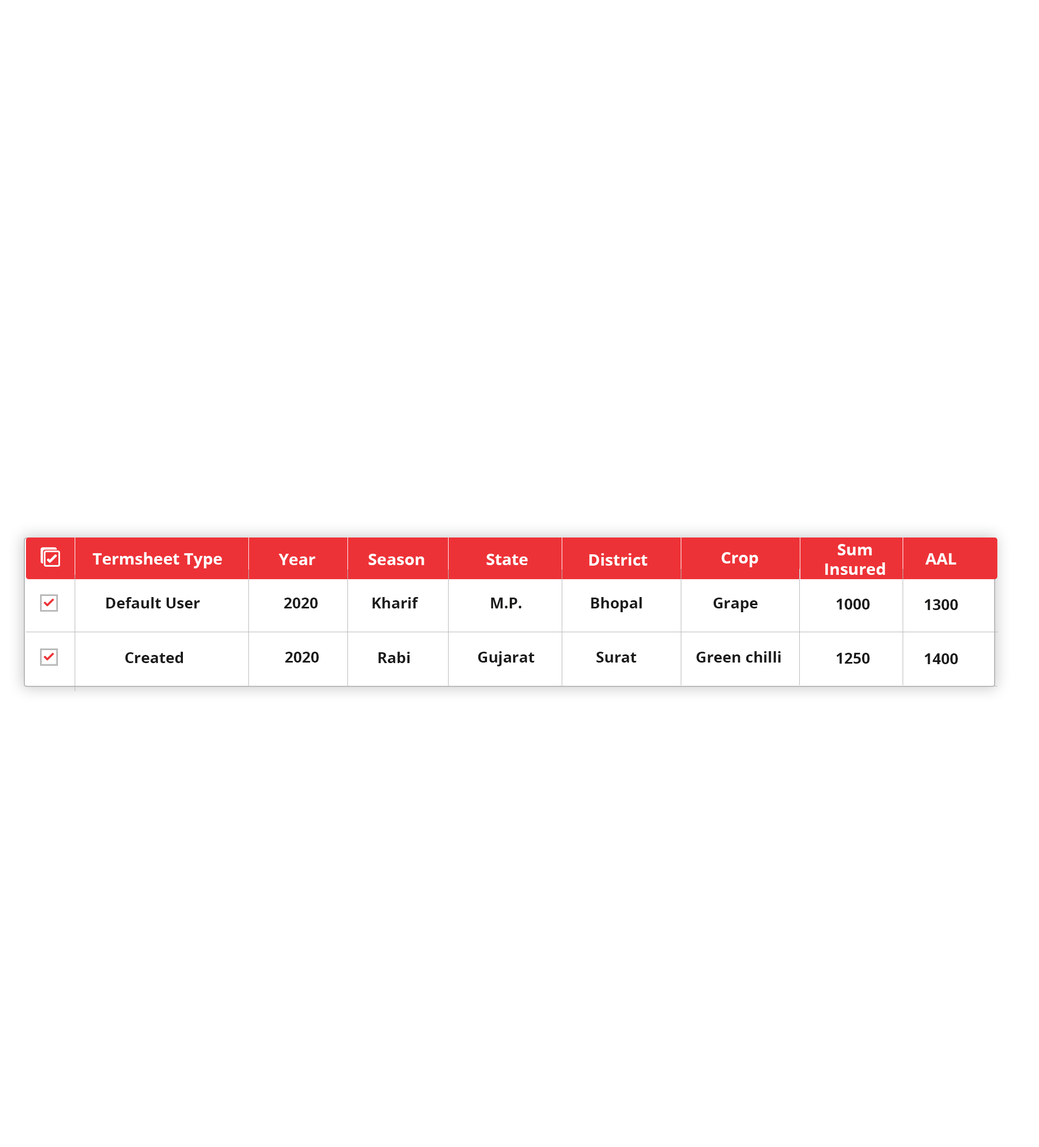
<style>
.page{position:relative;width:1039px;height:1147px;background:#ffffff}
.page>*{position:absolute;margin:0}
.t1{font:16.2px "OpenSans-Bold";color:#ffffff}
.t2{font:15.2px "OpenSans-Bold";color:#1b1b1a}
</style>
<div class="page">
<p class="t1" style="left:826px;top:544px;width:60px;height:31px;text-align:center">Sum<br>Insured</p>
<p class="t1" style="left:93px;top:552px;width:129px;height:16px">Termsheet Type</p>
<p class="t1" style="left:279px;top:554px;width:37px;height:11px">Year</p>
<p class="t1" style="left:369px;top:554px;width:55px;height:11px">Season</p>
<p class="t1" style="left:487px;top:554px;width:41px;height:11px">State</p>
<p class="t1" style="left:590px;top:553px;width:57px;height:13px">District</p>
<p class="t1" style="left:722px;top:552px;width:36px;height:15px">Crop</p>
<p class="t1" style="left:926px;top:553px;width:31px;height:12px">AAL</p>
<p class="t2" style="left:106px;top:597px;width:94px;height:12px">Default User</p>
<p class="t2" style="left:284px;top:598px;width:34px;height:11px">2020</p>
<p class="t2" style="left:372px;top:597px;width:46px;height:12px">Kharif</p>
<p class="t2" style="left:491px;top:598px;width:31px;height:11px">M.P.</p>
<p class="t2" style="left:591px;top:597px;width:51px;height:15px">Bhopal</p>
<p class="t2" style="left:714px;top:598px;width:44px;height:14px">Grape</p>
<p class="t2" style="left:836px;top:599px;width:34px;height:11px">1000</p>
<p class="t2" style="left:925px;top:599px;width:33px;height:11px">1300</p>
<p class="t2" style="left:125px;top:652px;width:58px;height:11px">Created</p>
<p class="t2" style="left:285px;top:652px;width:34px;height:11px">2020</p>
<p class="t2" style="left:378px;top:652px;width:32px;height:11px">Rabi</p>
<p class="t2" style="left:478px;top:651px;width:57px;height:15px">Gujarat</p>
<p class="t2" style="left:597px;top:652px;width:40px;height:11px">Surat</p>
<p class="t2" style="left:697px;top:651px;width:84px;height:12px">Green chilli</p>
<p class="t2" style="left:836px;top:653px;width:34px;height:11px">1250</p>
<p class="t2" style="left:925px;top:653px;width:33px;height:11px">1400</p>
</div>
